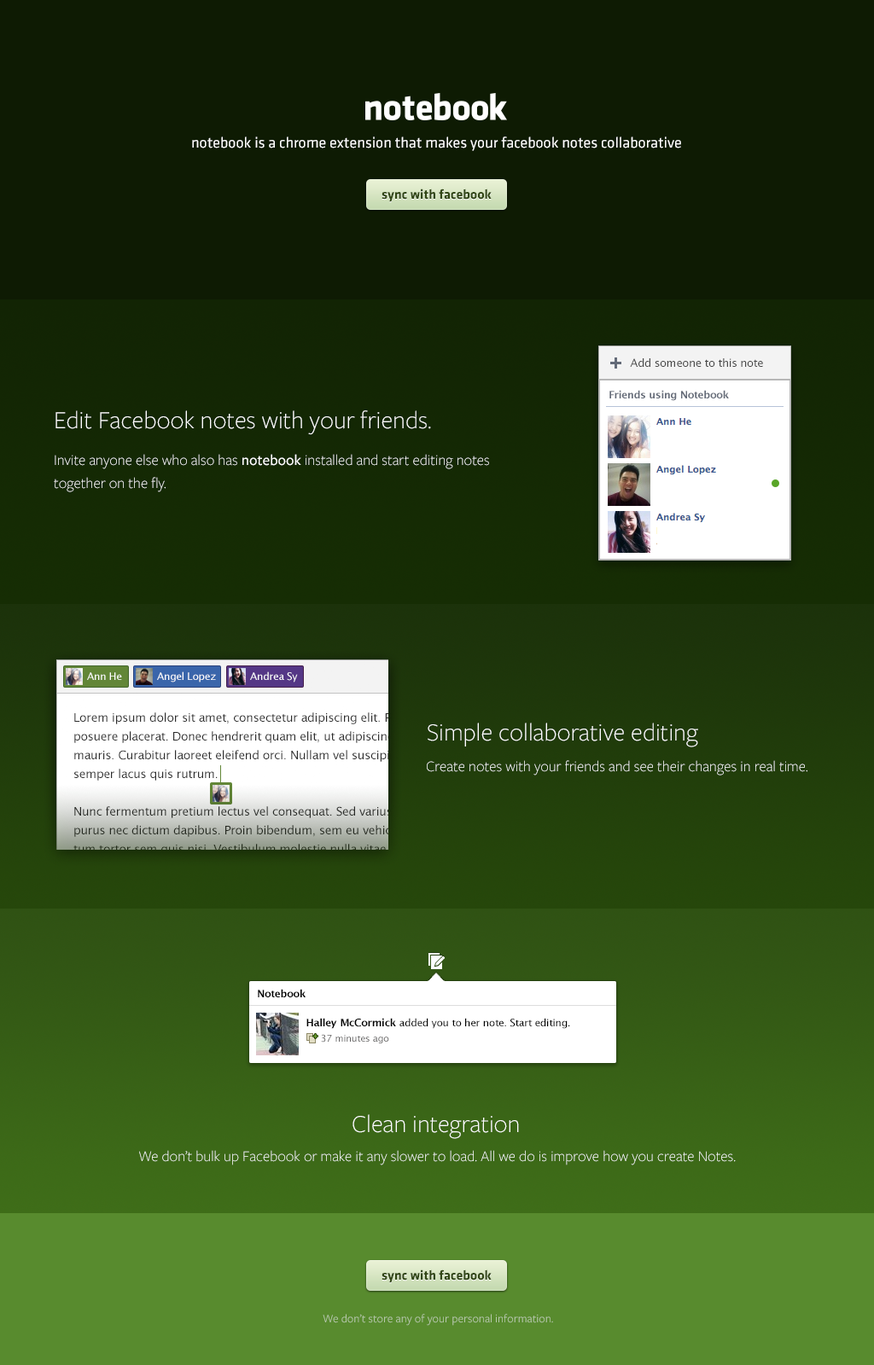
<style>
.page{position:relative;width:874px;height:1365px;background:#0e1b03}
.page>*{position:absolute;margin:0}
.t1{font:15.4px "Klavika-Regular";color:#ffffff}
.t2{font:13.6px "Klavika-Bold";color:#314714}
.t3{font:25.6px "FreightSans-Light";color:#ffffff}
.t4{font:15.4px/23px "FreightSans-Light";color:#ffffff}
.t5{font:15.4px/23px "FreightSans-Medium";color:#ffffff}
.t6{font:15.4px "FreightSans-Light";color:#ffffff}
.t7{font:11.9px "FreightSans-Book";color:#b8caac}
</style>
<div class="page">
<p class="t1" style="left:192px;top:136px;width:489px;height:15px">notebook is a chrome extension that makes your facebook notes collaborative</p>
<p class="t2" style="left:381px;top:189px;width:110px;height:13px">sync with facebook</p>
<p class="t3" style="left:55px;top:410px;width:376px;height:25px">Edit Facebook notes with your friends.</p>
<p class="t4" style="left:54px;top:454px;width:435px;height:38px">Invite anyone else who also has <span class="t5">notebook </span>installed and start editing notes<br>together on the fly.</p>
<p class="t3" style="left:427px;top:723px;width:271px;height:24px">Simple collaborative editing</p>
<p class="t6" style="left:427px;top:760px;width:380px;height:15px">Create notes with your friends and see their changes in real time.</p>
<p class="t3" style="left:352px;top:1114px;width:167px;height:25px">Clean integration</p>
<p class="t6" style="left:139px;top:1150px;width:596px;height:15px">We don’t bulk up Facebook or make it any slower to load. All we do is improve how you create Notes.</p>
<p class="t2" style="left:381px;top:1269px;width:110px;height:14px">sync with facebook</p>
<p class="t7" style="left:322px;top:1314px;width:231px;height:12px">We don’t store any of your personal information.</p>
</div>
